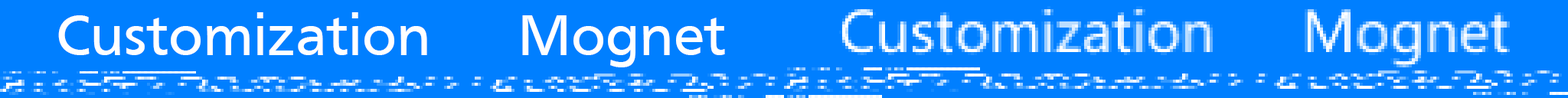
<style>
.page{position:relative;width:1568px;height:98px;background:#007fff}
.page>*{position:absolute;margin:0}
.t1{font:59.6px "Frutiger";color:#ffffff}
</style>
<div class="page">
<p class="t1" style="left:58px;top:12px;width:369px;height:43px">Customization</p>
<p class="t1" style="left:522px;top:15px;width:203px;height:52px">Mognet</p>
</div>
